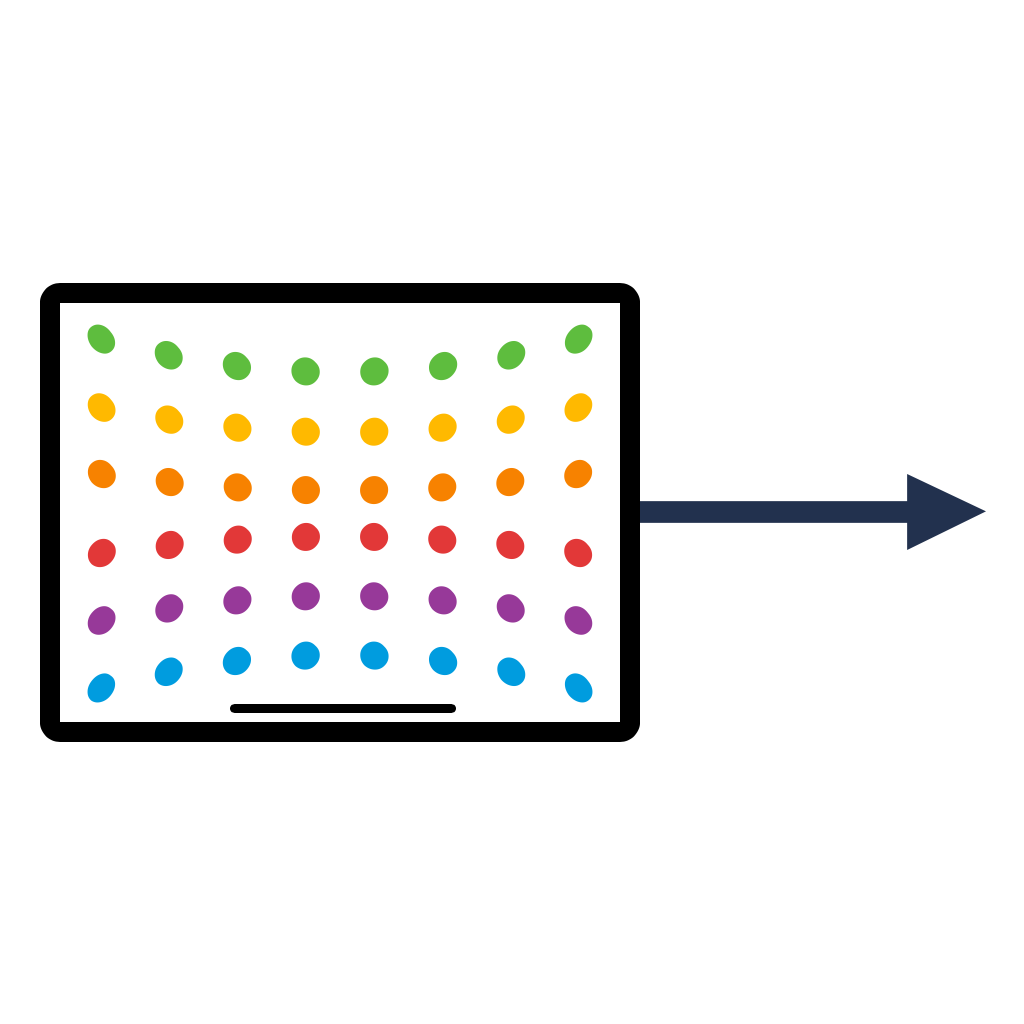
<style>
.page{position:relative;width:1024px;height:1024px;background:#ffffff}
.page>*{position:absolute;margin:0}
.t1{font:400px "Capsuula";color:#5ebd3e}
.t2{font:400px "Capsuula";color:#ffb900}
.t3{font:400px "Capsuula";color:#f78200}
.t4{font:400px "Capsuula";color:#e23838}
.t5{font:400px "Capsuula";color:#973999}
.t6{font:400px "Capsuula";color:#009cdf}
</style>
<div class="page">
<p class="t1" style="left:87px;top:324px;width:506px;height:62px">........</p>
<p class="t2" style="left:87px;top:393px;width:506px;height:53px">........</p>
<p class="t3" style="left:87px;top:459px;width:506px;height:46px">........</p>
<p class="t4" style="left:87px;top:522px;width:506px;height:46px">........</p>
<p class="t5" style="left:87px;top:582px;width:506px;height:53px">........</p>
<p class="t6" style="left:87px;top:641px;width:506px;height:62px">........</p>
</div>
